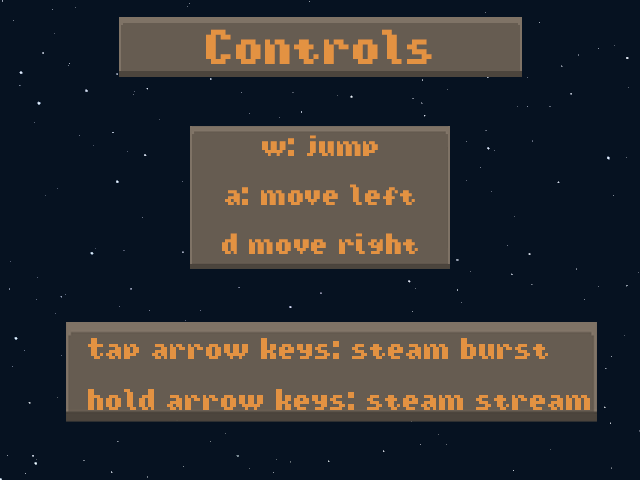
<style>
.page{position:relative;width:640px;height:480px;background:#061221}
.page>*{position:absolute;margin:0}
.t1{font:41.2px "Tiny-Islanders";color:#e39242}
.t2{font:41.9px "Tiny-Islanders";color:#e39242}
</style>
<div class="page">
<p class="t1" style="left:222px;top:135px;width:196px;height:119px;text-align:center">w: jump<br>a: move left<br>d move right</p>
<p class="t2" style="left:88px;top:338px;width:502px;height:72px">Tap arrow keys: steam burst<br>hold arrow keys: steam stream</p>
</div>
